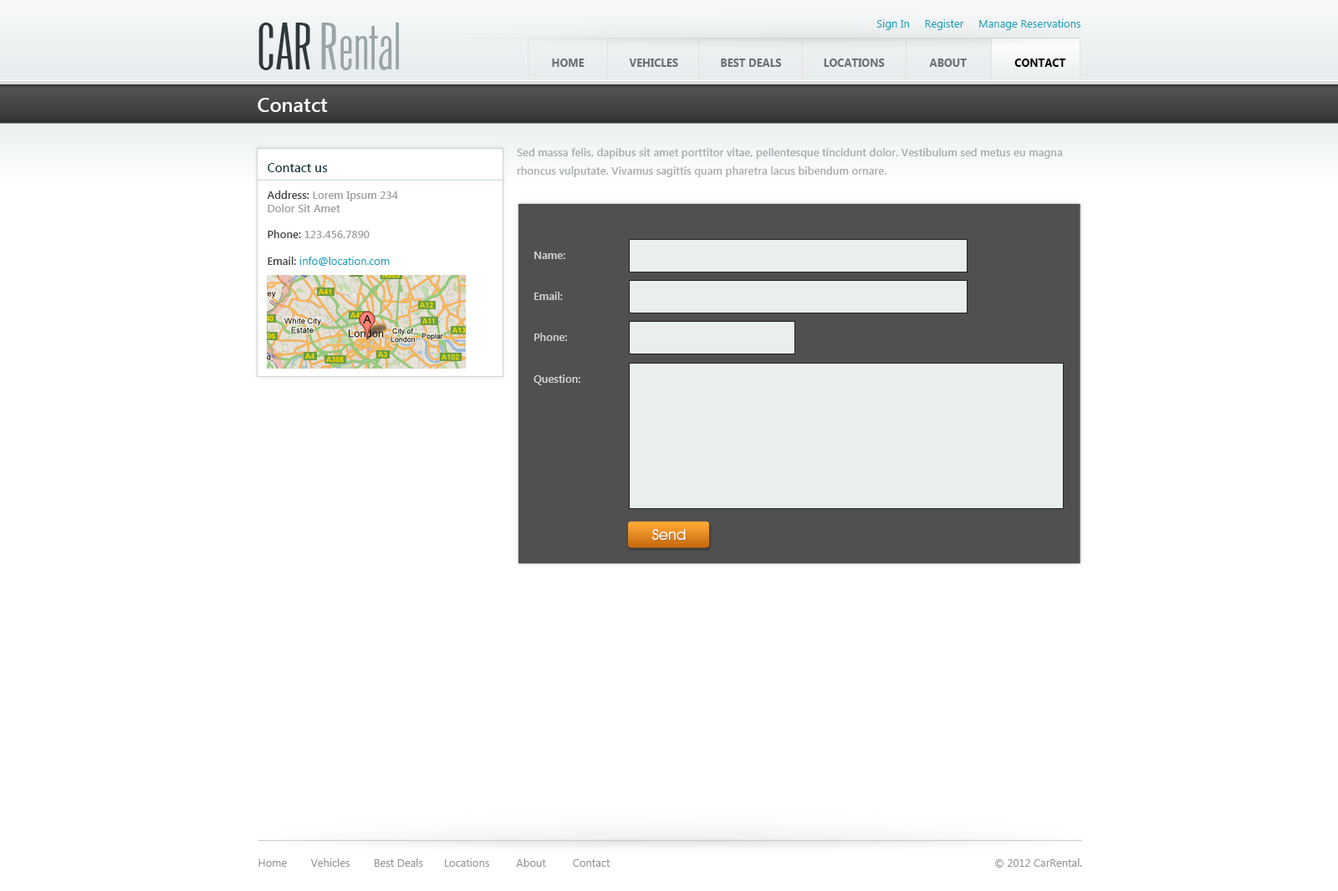
<style>
.page{position:relative;width:1338px;height:891px;background:#ffffff}
.page>*{position:absolute;margin:0}
.t1{font:60.2px "Arizona";color:#99a4a6}
.t2{font:60.2px "Arizona";color:#2f383a;text-transform:uppercase}
.t3{font:10.9px "SegoeUI";color:#1aa1b9}
.t4{font:10.9px "SegoeUI-Bold";color:#6c7273;text-transform:uppercase}
.t5{font:10.9px "SegoeUI-Bold";color:#000000;text-transform:uppercase}
.t6{font:20.1px "SegoeUI-SemiBold";color:#fefefe}
.t7{font:10.9px/18.4px "SegoeUI-SemiBold";color:#a8acae}
.t8{font:10.9px "SegoeUI-SemiBold";color:#9da0a0}
.t9{font:12.5px "SegoeUI-SemiBold";color:#193d44}
.t10{font:10.9px "SegoeUI-SemiBold";color:#423f3f}
.t11{font:10.9px "SegoeUI-SemiBold";color:#d1d3d5}
.t12{font:15.1px "AvantGardeITCbyBT-Book";color:#ffffff}
.t13{font:10.9px "SegoeUI";color:#909596}
</style>
<div class="page">
<p class="t1" style="left:258px;top:23px;width:141px;height:47px"><span class="t2">Car</span> Rental</p>
<p class="t3" style="left:876px;top:19px;width:205px;height:11px">Sign In     Register     Manage Reservations</p>
<p class="t4" style="left:552px;top:59px;width:514px;height:8px">Home               Vehicles              Best Deals              Locations               About               <span class="t5"> Contact</span></p>
<p class="t6" style="left:258px;top:98px;width:70px;height:14px">Conatct</p>
<p class="t7" style="left:517px;top:148px;width:546px;height:29px">Sed massa felis, dapibus sit amet porttitor vitae, pellentesque tincidunt dolor. Vestibulum sed metus eu magna rhoncus vulputate. Vivamus sagittis quam pharetra lacus bibendum ornare.</p>
<p class="t8" style="left:267px;top:163px;width:131px;height:103px"><span class="t9">Contact us<br><br></span><span class="t10">Address:</span> Lorem Ipsum 234<br>Dolor Sit Amet<br><br><span class="t10">Phone:</span> 123.456.7890<br><br><span class="t10">Email: </span><span class="t3">info@location.com</span></p>
<p class="t11" style="left:534px;top:252px;width:31px;height:7px">Name:</p>
<p class="t11" style="left:534px;top:292px;width:29px;height:8px">Email:</p>
<p class="t11" style="left:534px;top:333px;width:33px;height:8px">Phone:</p>
<p class="t11" style="left:533px;top:375px;width:47px;height:10px">Question:</p>
<p class="t12" style="left:652px;top:529px;width:34px;height:11px">Send</p>
<p class="t13" style="left:258px;top:859px;width:352px;height:8px">Home        Vehicles        Best Deals       Locations         About         Contact</p>
<p class="t13" style="left:995px;top:859px;width:87px;height:9px">© 2012 CarRental.</p>
</div>
